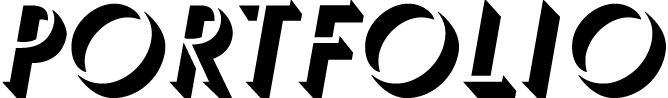
<style>
.page{position:relative;width:668px;height:98px;background:#ffffff}
.page>*{position:absolute;margin:0}
.t1{font:130px "UmbraStd";color:#000000;font-style:italic}
</style>
<div class="page">
<p class="t1" style="left:2px;top:0px;width:664px;height:98px">portfolio</p>
</div>
